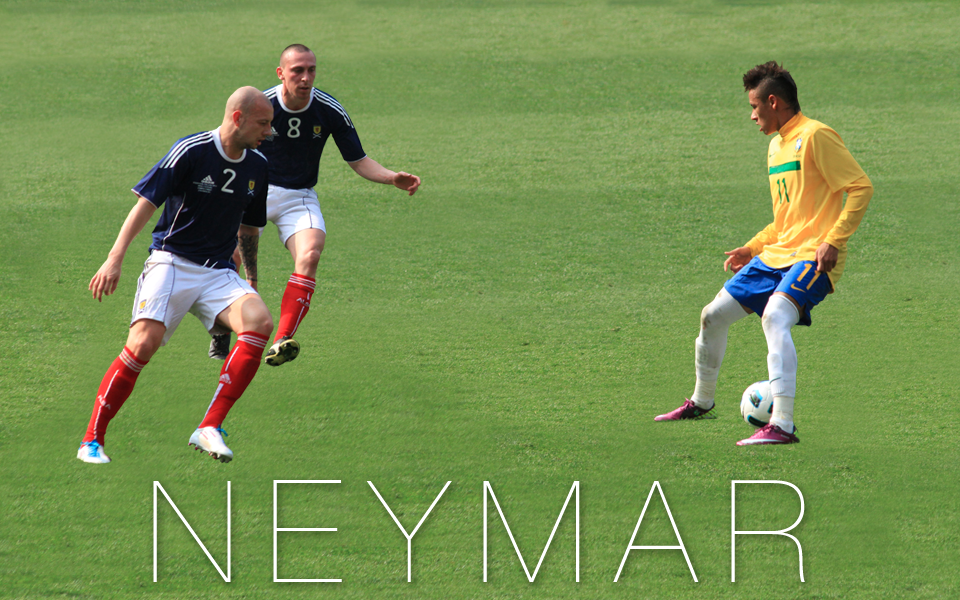
<style>
.page{position:relative;width:960px;height:600px}
.page>*{position:absolute;margin:0}
.t1{font:141.8px "HelveticaNeue-UltraLight";letter-spacing:0.2em;color:#ffffff;text-transform:uppercase}
</style>
<div class="page">
<p class="t1" style="left:153px;top:480px;width:652px;height:102px">Neymar</p>
</div>
